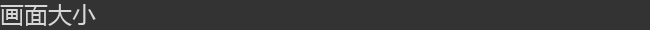
<style>
.page{position:relative;width:650px;height:30px;background:#333333}
.page>*{position:absolute;margin:0}
.t1{font:24px "MicrosoftYaHei";color:#d7d7d7}
</style>
<div class="page">
<p class="t1" style="left:0px;top:4px;width:96px;height:22px">画面大小</p>
</div>
